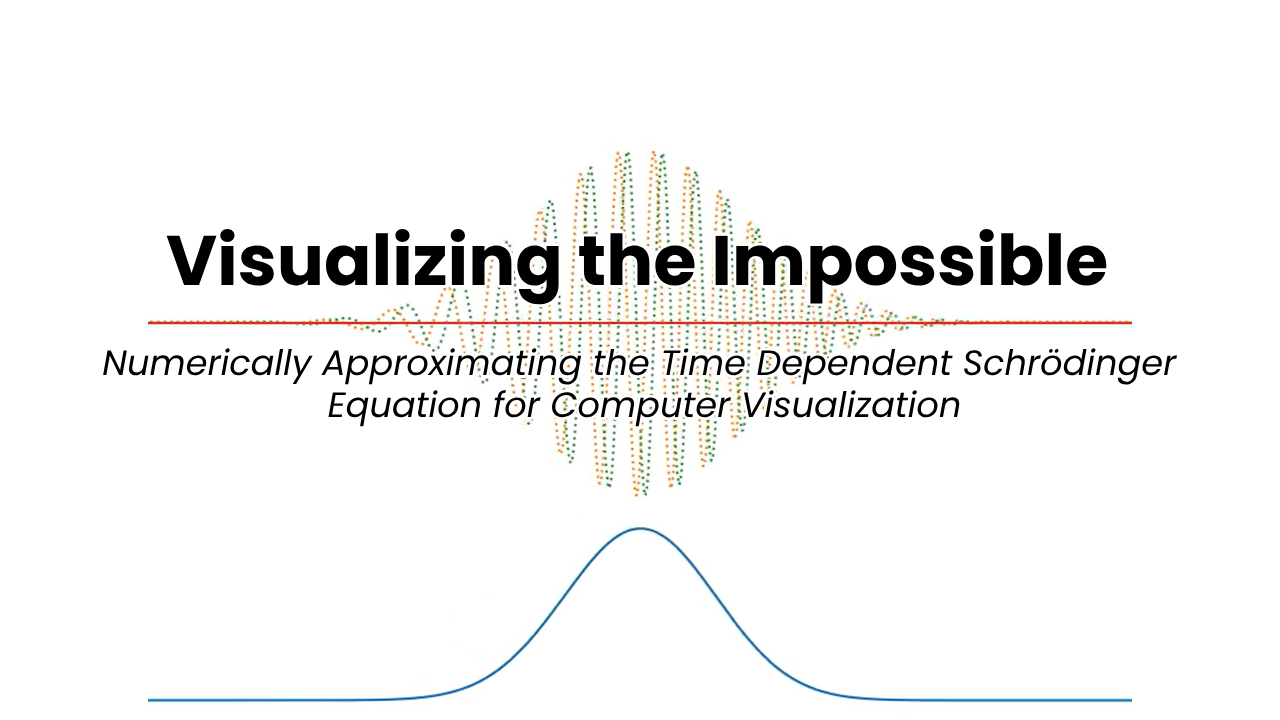
<style>
.page{position:relative;width:1280px;height:720px;background:#ffffff}
.page>*{position:absolute;margin:0}
.t1{font:70px "Poppins-Bold";color:#000000}
.t2{font:35.2px "Poppins-Italic";color:#000000}
</style>
<div class="page">
<p class="t1" style="left:166px;top:228px;width:941px;height:77px">Visualizing the Impossible</p>
<p class="t2" style="left:103px;top:348px;width:1074px;height:79px;text-align:center">Numerically Approximating the Time Dependent Schrödinger <br>Equation for Computer Visualization</p>
</div>
